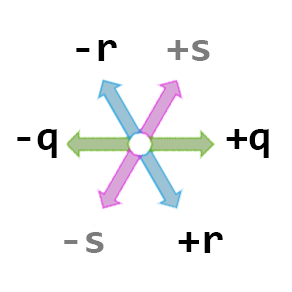
<style>
.page{position:relative;width:292px;height:292px;background:#ffffff}
.page>*{position:absolute;margin:0}
.t1{font:43px "Consolas-Bold";color:#000000}
.t2{font:43px "Consolas-Bold";color:#7c7c7c}
</style>
<div class="page">
<p class="t1" style="left:17px;top:40px;width:252px;height:213px;text-align:center">-r  <span class="t2">+s<br><br></span>-q       +q<br><br><span class="t2">-s</span>   +r</p>
</div>
